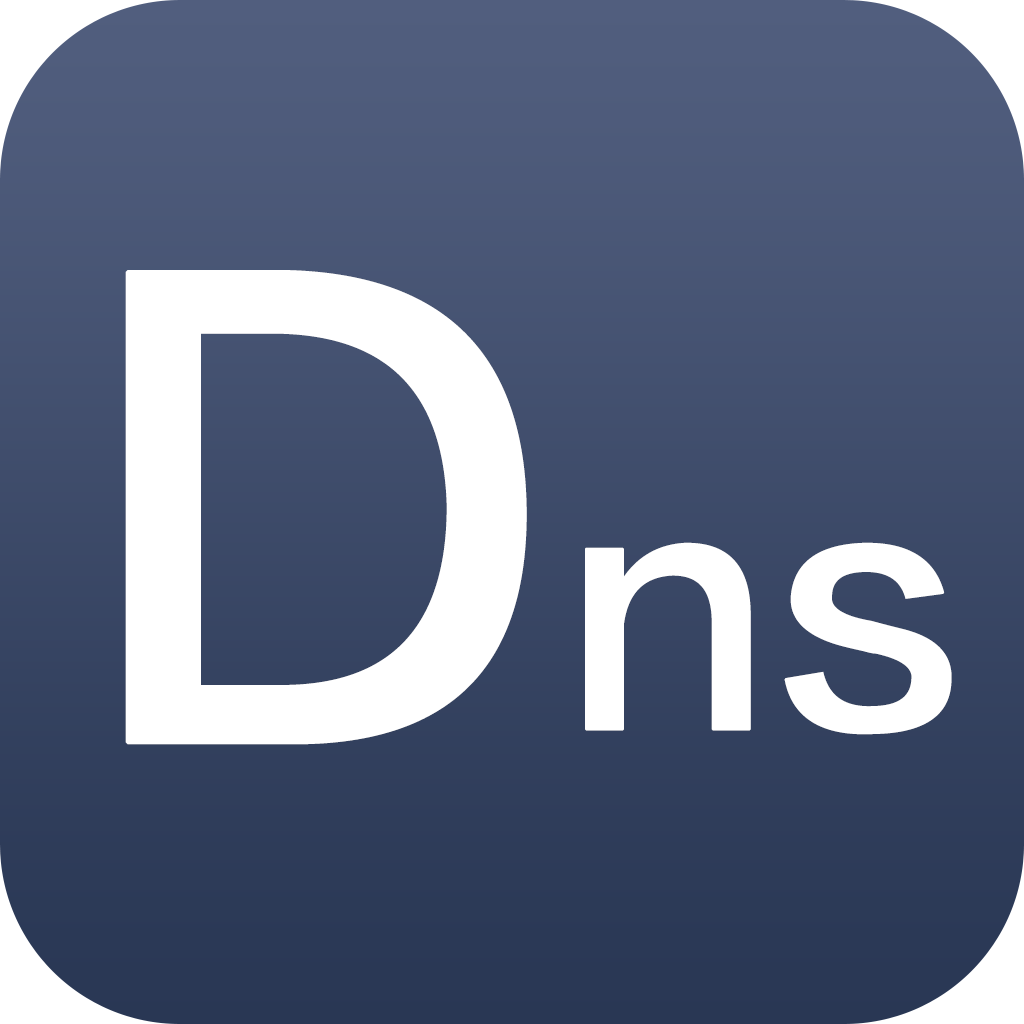
<style>
.page{position:relative;width:1024px;height:1024px}
.page>*{position:absolute;margin:0}
.t1{font:312px "FZLTZHK--GBK1-0";letter-spacing:-0.02em;color:#ffffff;font-weight:bold}
.t2{font:587px "FZLTZHK--GBK1-0";letter-spacing:-0.02em;color:#ffffff;font-weight:bold}
</style>
<div class="page">
<p class="t1" style="left:125px;top:270px;width:827px;height:475px"><span class="t2">D</span>ns</p>
</div>
